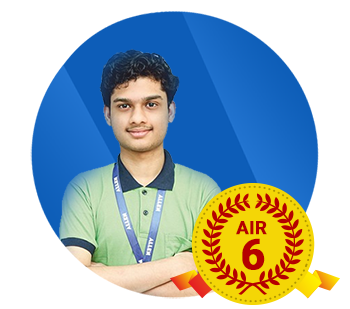
<style>
.page{position:relative;width:350px;height:309px;background:#ffffff}
.page>*{position:absolute;margin:0}
.t1{font:18.3px "Roboto-Bold";color:#b50000;font-weight:bold}
.t2{font:42.1px "Roboto-Bold";color:#b50000;font-weight:bold}
</style>
<div class="page">
<p class="t1" style="left:236px;top:221px;width:31px;height:14px">AIR</p>
<p class="t2" style="left:242px;top:238px;width:23px;height:32px">6</p>
</div>
